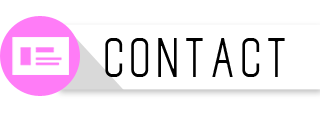
<style>
.page{position:relative;width:320px;height:117px;background:#ffffff}
.page>*{position:absolute;margin:0}
.t1{font:49.6px "078MKSDMediumCondensed";letter-spacing:0.14em;color:#000000}
</style>
<div class="page">
<p class="t1" style="left:105px;top:38px;width:180px;height:39px">CONTACT</p>
</div>
